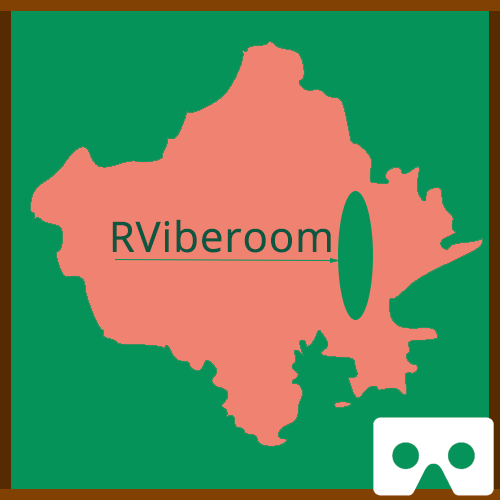
<style>
.page{position:relative;width:500px;height:500px;background:#059359}
.page>*{position:absolute;margin:0}
.t1{font:41.7px "OpenSans-Regular";color:#0d5740;font-weight:bold}
</style>
<div class="page">
<p class="t1" style="left:112px;top:219px;width:219px;height:34px">RViberoom</p>
</div>
